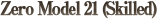
<style>
.page{position:relative;width:157px;height:19px;background:#ffffff}
.page>*{position:absolute;margin:0}
.t1{font:18px "RyuminPro-ExBold";letter-spacing:-0.085em;color:#4a3f32;font-weight:bold;scale:0.9 1}
</style>
<div class="page">
<p class="t1" style="left:0px;top:1px;width:157px;height:18px">Zero Model 21 (Skilled)</p>
</div>
